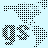
<style>
.page{position:relative;width:48px;height:48px;background:#d7faff}
.page>*{position:absolute;margin:0}
.t1{font:20px "Copy0865";letter-spacing:-0.04em}
</style>
<div class="page">
<p class="t1" style="left:2px;top:25px;width:28px;height:20px">gs</p>
</div>
